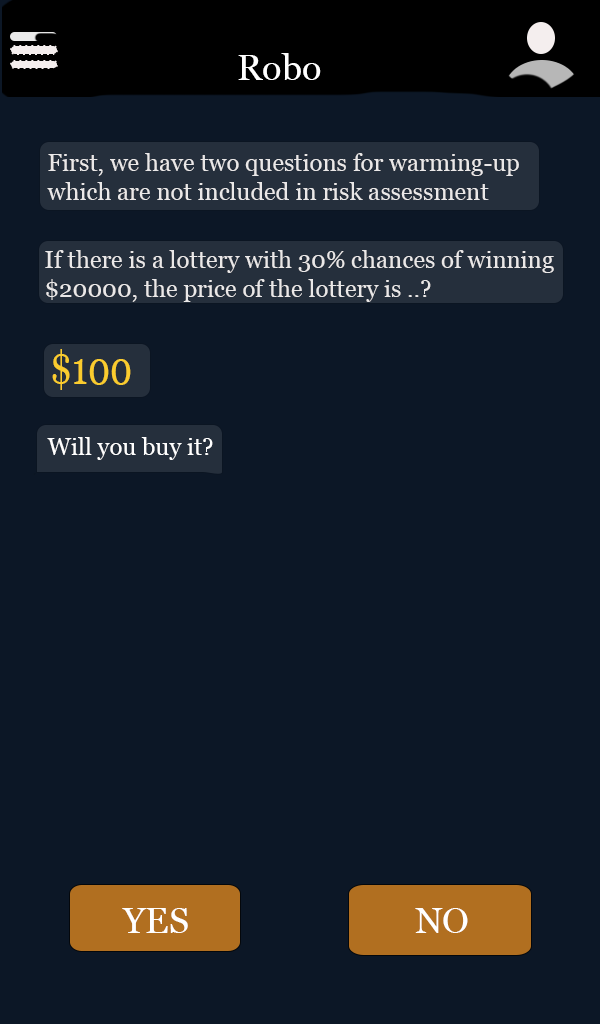
<style>
.page{position:relative;width:600px;height:1024px;background:#0c1726}
.page>*{position:absolute;margin:0}
.t1{font:36px "Georgia";color:#ffffff}
.t2{font:24px "Georgia";color:#e8e5e5}
.t3{font:46.1px "Georgia";color:#f9c616;scale:0.78 1}
.t4{font:24px "Georgia";color:#ffffff}
</style>
<div class="page">
<p class="t1" style="left:238px;top:53px;width:83px;height:27px">Robo</p>
<p class="t2" style="left:47px;top:153px;width:472px;height:47px">First, we have two questions for warming-up <br>which are not included in risk assessment</p>
<p class="t2" style="left:45px;top:250px;width:509px;height:52px">If there is a lottery with 30% chances of winning <br>$20000, the price of the lottery is ..?</p>
<p class="t3" style="left:52px;top:349px;width:79px;height:41px">$100</p>
<p class="t4" style="left:47px;top:437px;width:166px;height:23px">Will you buy it?</p>
<p class="t1" style="left:122px;top:908px;width:346px;height:25px">YES                          NO</p>
</div>
